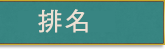
<style>
.page{position:relative;width:165px;height:50px;background:#388582}
.page>*{position:absolute;margin:0}
.t1{font:24px "GothicMB101Pr6N-Light";letter-spacing:0.1em;color:#ede0d3;font-weight:bold}
</style>
<div class="page">
<p class="t1" style="left:38px;top:9px;width:50px;height:24px">排名</p>
</div>
